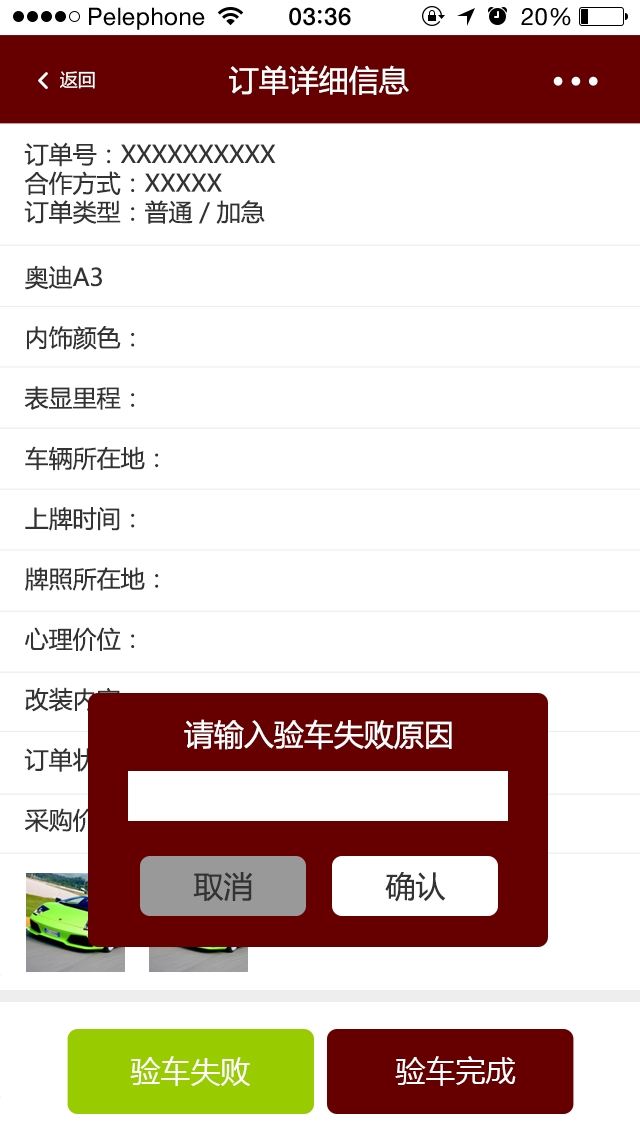
<style>
.page{position:relative;width:640px;height:1138px;background:#ffffff}
.page>*{position:absolute;margin:0}
.t1{font:24px "HelveticaNeue";letter-spacing:0.02em;color:#000000}
.t2{font:24px "HelveticaNeue-Medium";letter-spacing:0.03em;color:#000000}
.t3{font:30px "MicrosoftYaHei";color:#ffffff}
.t4{font:18px "MicrosoftYaHei";color:#ffffff}
.t5{font:24px "MicrosoftYaHei";color:#333333}
.t6{font:24px/60.3px "MicrosoftYaHei";color:#333333}
.t7{font:30px "MicrosoftYaHei";color:#333333}
</style>
<div class="page">
<p class="t1" style="left:89px;top:7px;width:116px;height:23px">Pelephone</p>
<p class="t2" style="left:289px;top:7px;width:62px;height:19px">03 36</p>
<p class="t1" style="left:521px;top:7px;width:50px;height:19px">20%</p>
<p class="t3" style="left:229px;top:65px;width:180px;height:30px">订单详细信息</p>
<p class="t4" style="left:60px;top:71px;width:35px;height:18px">返回</p>
<p class="t5" style="left:24px;top:142px;width:252px;height:82px">订单号：XXXXXXXXXX<br>合作方式：XXXXX<br>订单类型：普通／加急</p>
<p class="t6" style="left:24px;top:265px;width:135px;height:567px">奥迪A3<br>内饰颜色：<br>表显里程：<br>车辆所在地：<br>上牌时间：<br>牌照所在地：<br>心理价位：<br>改装内容：<br>订单状态：<br>采购价格：</p>
<p class="t3" style="left:184px;top:719px;width:268px;height:31px">请输入验车失败原因</p>
<p class="t7" style="left:193px;top:872px;width:59px;height:29px">取消</p>
<p class="t7" style="left:385px;top:871px;width:61px;height:31px">确认</p>
<p class="t3" style="left:130px;top:1056px;width:121px;height:30px">验车失败</p>
<p class="t3" style="left:395px;top:1056px;width:121px;height:30px">验车完成</p>
</div>
